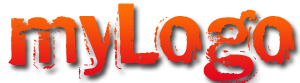
<style>
.page{position:relative;width:300px;height:83px;background:#ffffff}
.page>*{position:absolute;margin:0}
.t1{font:79px "rustedplastic"}
</style>
<div class="page">
<p class="t1" style="left:8px;top:3px;width:287px;height:82px">myLogo</p>
</div>
